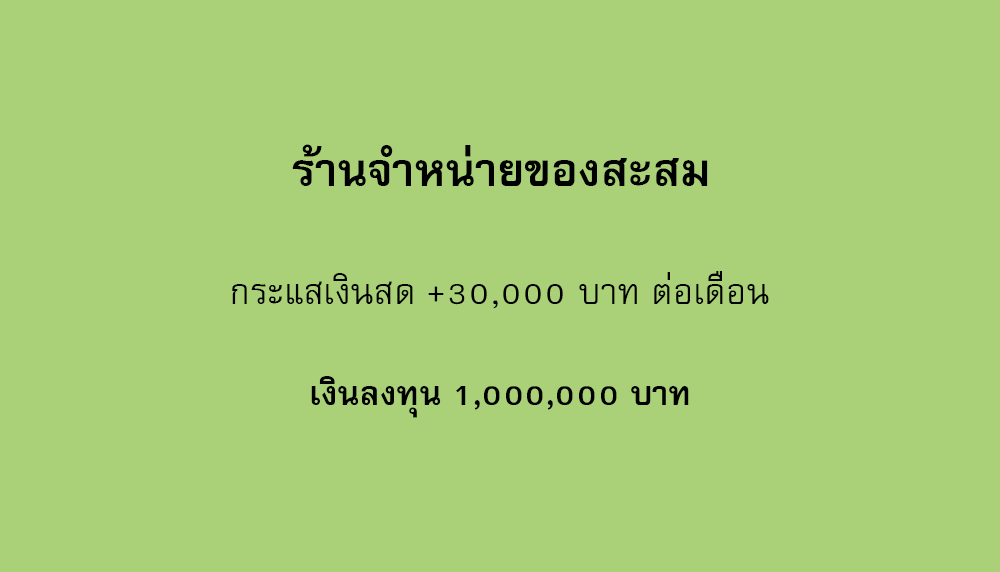
<style>
.page{position:relative;width:1000px;height:572px;background:#aad178}
.page>*{position:absolute;margin:0}
.t1{font:64px "FreesiaUPCBold";color:#000000}
.t2{font:50px "FreesiaUPC";color:#000000}
.t3{font:47px "FreesiaUPCBold";color:#000000}
</style>
<div class="page">
<p class="t1" style="left:292px;top:144px;width:416px;height:42px">ร้านจำหน่ายของสะสม</p>
<p class="t2" style="left:232px;top:271px;width:537px;height:38px">กระแสเงินสด +30,000 บาท ต่อเดือน</p>
<p class="t3" style="left:311px;top:376px;width:378px;height:42px">เงินลงทุน 1,000,000 บาท</p>
</div>
